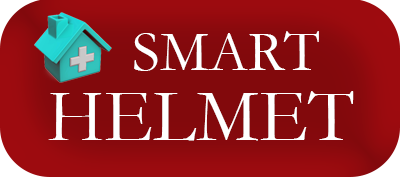
<style>
.page{position:relative;width:400px;height:177px;background:#82090c}
.page>*{position:absolute;margin:0}
.t1{font:58px "Garamond";color:#ffffff}
.t2{font:75px "Garamond";color:#ffffff}
</style>
<div class="page">
<p class="t1" style="left:134px;top:31px;width:185px;height:40px">SMART</p>
<p class="t2" style="left:48px;top:91px;width:306px;height:50px">HELMET</p>
</div>
